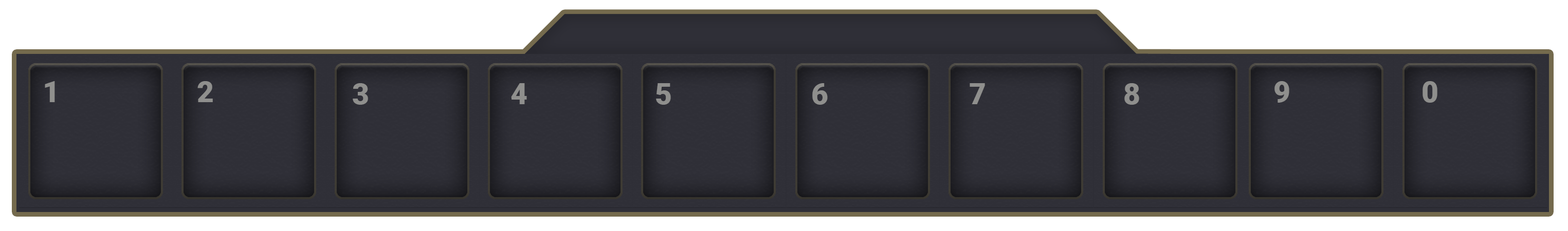
<style>
.page{position:relative;width:1568px;height:231px}
.page>*{position:absolute;margin:0}
.t1{font:29.5px "Roboto-Black";color:#8f8f8d;text-transform:uppercase}
</style>
<div class="page">
<p class="t1" style="left:45px;top:81px;width:10px;height:21px">1</p>
<p class="t1" style="left:197px;top:81px;width:16px;height:21px">2</p>
<p class="t1" style="left:353px;top:83px;width:15px;height:22px">3</p>
<p class="t1" style="left:511px;top:83px;width:16px;height:21px">4</p>
<p class="t1" style="left:656px;top:83px;width:15px;height:22px">5</p>
<p class="t1" style="left:812px;top:83px;width:16px;height:22px">6</p>
<p class="t1" style="left:970px;top:83px;width:15px;height:21px">7</p>
<p class="t1" style="left:1124px;top:83px;width:15px;height:22px">8</p>
<p class="t1" style="left:1274px;top:81px;width:15px;height:22px">9</p>
<p class="t1" style="left:1423px;top:81px;width:14px;height:22px">0</p>
</div>
